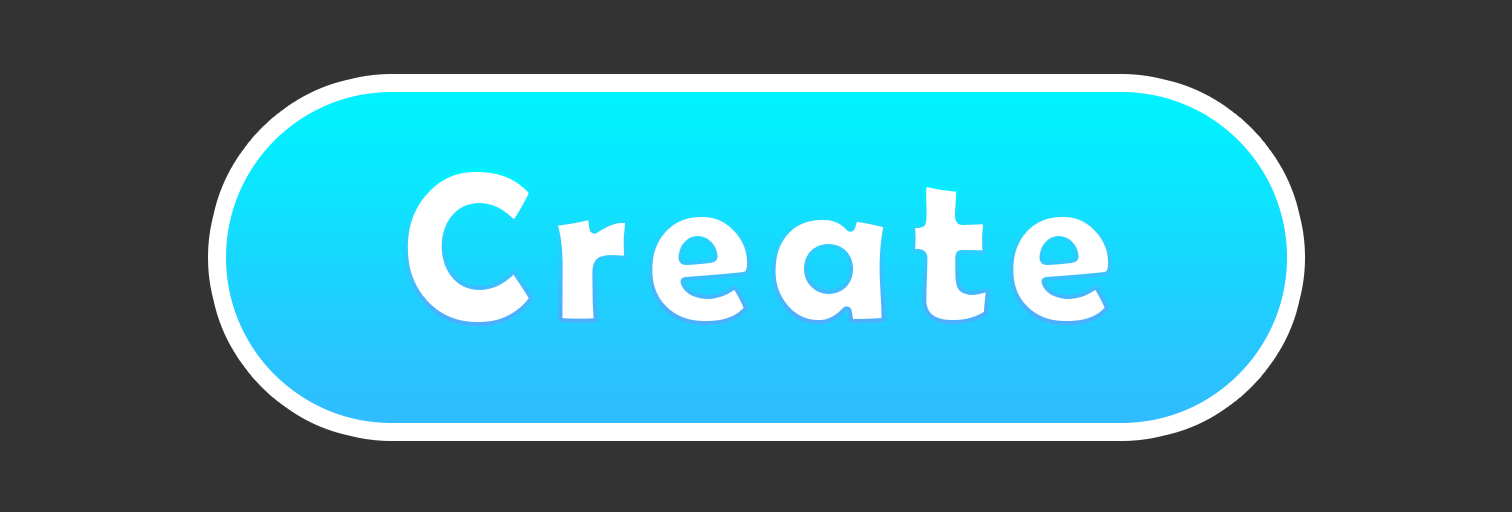
<style>
.page{position:relative;width:1512px;height:512px;background:#333333}
.page>*{position:absolute;margin:0}
.t1{font:218.9px "BerlinSansFBDemi-Bold";letter-spacing:0.06em;color:#ffffff}
</style>
<div class="page">
<p class="t1" style="left:403px;top:168px;width:710px;height:158px">Create</p>
</div>
